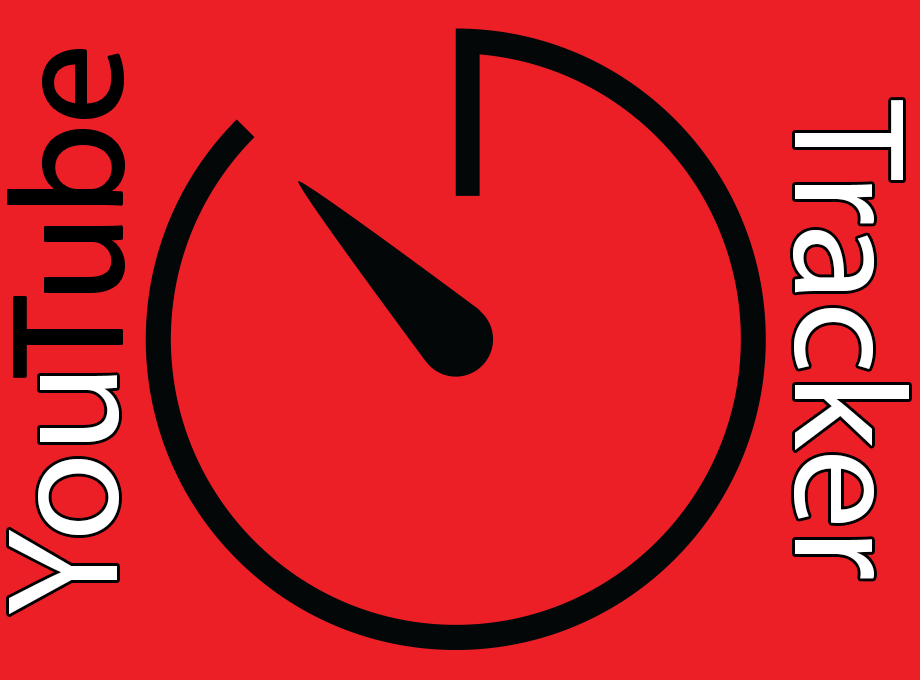
<style>
.page{position:relative;width:920px;height:680px;background:#ec1f27}
.page>*{position:absolute;margin:0}
.t1{font:160px "MyriadPro-Regular";color:#000000}
.t2{font:160px "MyriadPro-Regular";color:#ffffff}
</style>
<div class="page">
<p class="t1" style="left:8px;top:50px;width:116px;height:327px;rotate:-90deg">Tube</p>
<p class="t2" style="left:792px;top:100px;width:117px;height:479px;rotate:90deg">Tracker</p>
<p class="t2" style="left:9px;top:375px;width:110px;height:240px;rotate:-90deg">You</p>
</div>
